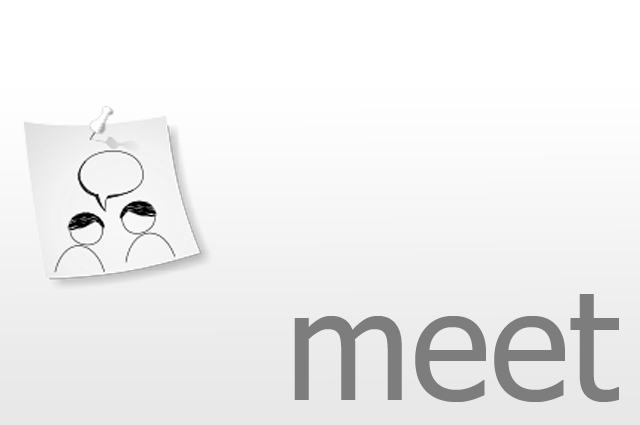
<style>
.page{position:relative;width:640px;height:425px;background:#ffffff}
.page>*{position:absolute;margin:0}
.t1{font:150px "Tahoma";color:#7d7d7d}
</style>
<div class="page">
<p class="t1" style="left:294px;top:294px;width:325px;height:108px">meet</p>
</div>
